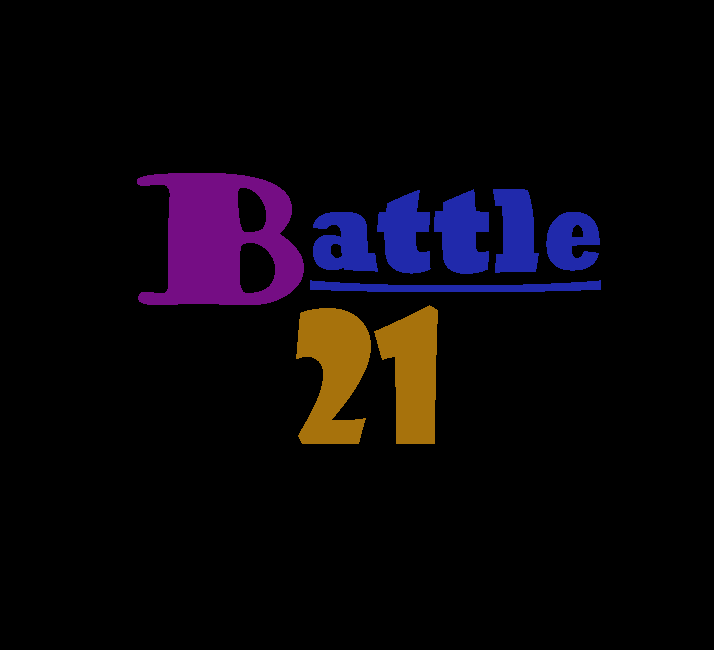
<style>
.page{position:relative;width:714px;height:650px;background:#000000}
.page>*{position:absolute;margin:0}
.t1{font:177.8px "GoudyStout";letter-spacing:-0.01em;color:#750d84}
.t2{font:106.7px "Rockwell-ExtraBold";letter-spacing:-0.01em;color:#2029ab;text-decoration:underline}
.t3{font:177.8px "ShowcardGothic-Reg";letter-spacing:-0.01em;color:#a7720c}
</style>
<div class="page">
<p class="t1" style="left:137px;top:173px;width:167px;height:132px">B</p>
<p class="t2" style="left:310px;top:189px;width:291px;height:103px">attle</p>
<p class="t3" style="left:296px;top:305px;width:142px;height:139px">21</p>
</div>
